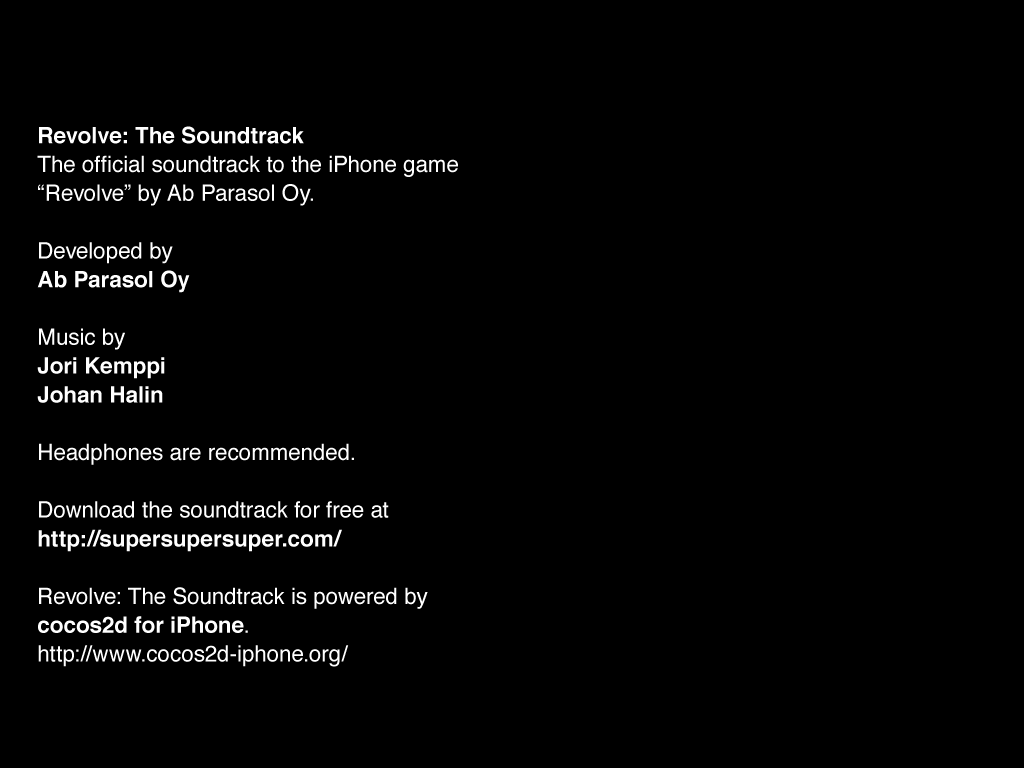
<style>
.page{position:relative;width:1024px;height:768px;background:#000000}
.page>*{position:absolute;margin:0}
.t1{font:22.4px/28.8px "Helvetica";color:#ffffff}
.t2{font:22.4px/28.8px "Helvetica-Bold";color:#ffffff}
</style>
<div class="page">
<p class="t1" style="left:37px;top:126px;width:421px;height:541px"><span class="t2">Revolve: The Soundtrack<br></span>The official soundtrack to the iPhone game “Revolve” by Ab Parasol Oy.<br><br>Developed by<br><span class="t2">Ab Parasol Oy<br></span><br>Music by<br><span class="t2">Jori Kemppi<br>Johan Halin<br></span><br>Headphones are recommended.<br><br>Download the soundtrack for free at <span class="t2">http://supersupersuper.com/<br></span><br>Revolve: The Soundtrack is powered by <span class="t2">cocos2d for iPhone</span>.<br>http://www.cocos2d-iphone.org/</p>
</div>
